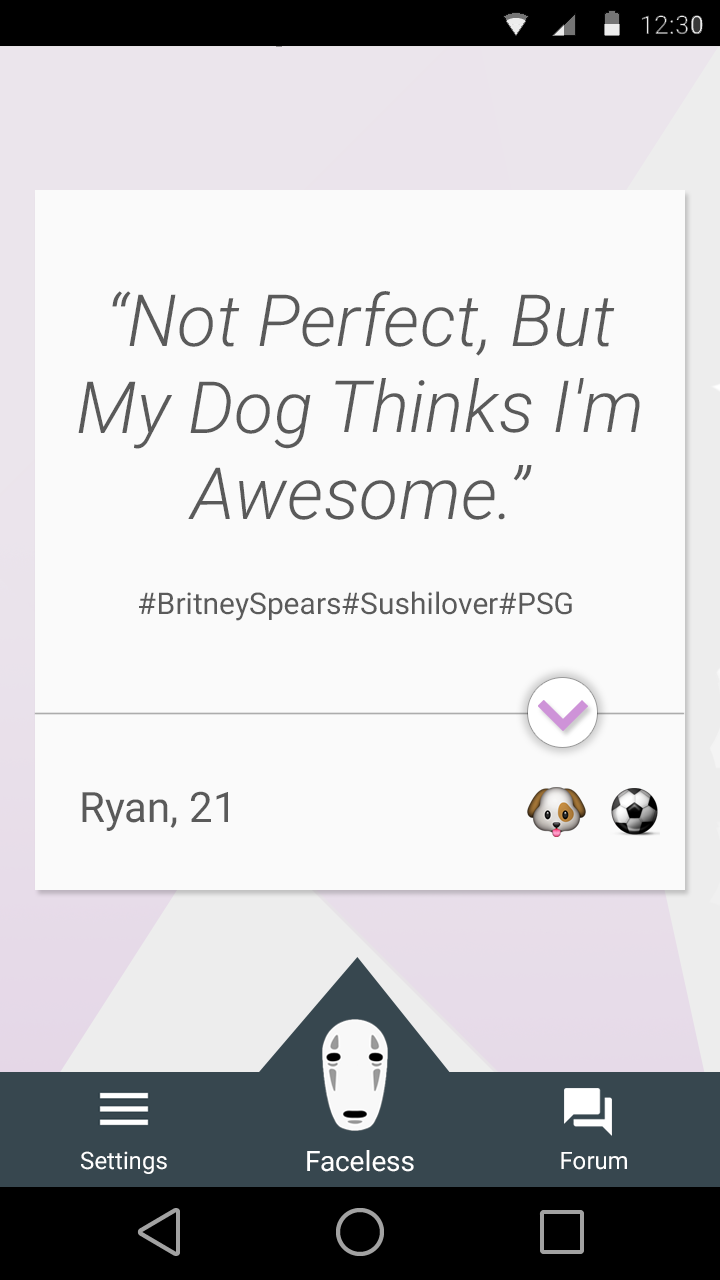
<style>
.page{position:relative;width:720px;height:1280px;background:#fafafa}
.page>*{position:absolute;margin:0}
.t1{font:72px "Roboto-LightItalic";color:#5a5a5a}
.t2{font:30px "Roboto-Regular";color:#5a5a5a}
.t3{font:42px "Roboto-Regular";color:#5a5a5a}
.t4{font:24px "Roboto-Regular";color:#ffffff}
.t5{font:28px "Roboto-Regular";color:#ffffff}
</style>
<div class="page">
<p class="t1" style="left:78px;top:291px;width:562px;height:229px;text-align:center">“Not Perfect, But My Dog Thinks I'm Awesome.”</p>
<p class="t2" style="left:139px;top:591px;width:433px;height:30px">#BritneySpears#Sushilover#PSG</p>
<p class="t3" style="left:82px;top:791px;width:146px;height:40px">Ryan, 21</p>
<p class="t4" style="left:81px;top:1151px;width:86px;height:23px">Settings</p>
<p class="t5" style="left:307px;top:1150px;width:107px;height:22px">Faceless</p>
<p class="t4" style="left:561px;top:1152px;width:66px;height:18px">Forum</p>
</div>
